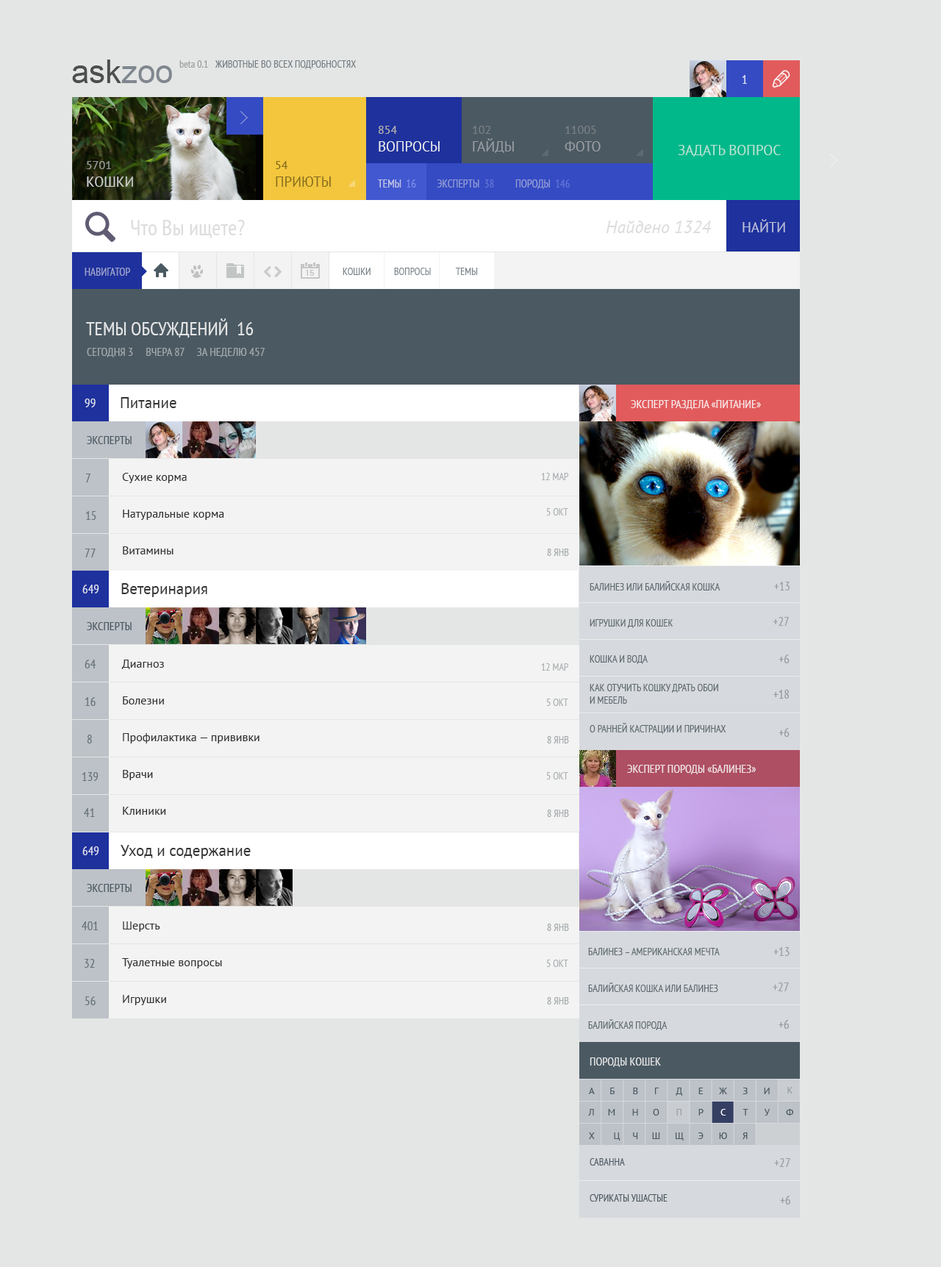
<style>
.page{position:relative;width:941px;height:1267px;background:#e4e6e5}
.page>*{position:absolute;margin:0}
.t1{font:32.4px "ArialMT"}
.t2{font:10.3px "PTSans-Narrow";color:#9a9c9b}
.t3{font:10.3px "PTSans-Narrow";color:#737d82;text-transform:uppercase}
.t4{font:12.5px "PTSans-Narrow";color:#e1e3f4}
.t5{font:14px/17.6px "PTSans-Regular";color:#ebecee;text-transform:uppercase}
.t6{font:11.8px/17.6px "PTSans-Regular";color:#aeaeae;text-transform:uppercase}
.t7{font:14px/17.6px "PTSans-Regular";color:#989ea3;text-transform:uppercase}
.t8{font:11.8px/17.6px "PTSans-Regular";color:#989ea3;text-transform:uppercase}
.t9{font:11.8px/17.6px "PTSans-Regular";text-transform:uppercase}
.t10{font:14px/17.6px "PTSans-Regular";text-transform:uppercase}
.t11{font:14px "PTSans-Regular";color:#b8e4d5;text-transform:uppercase}
.t12{font:14px/17.6px "PTSans-Regular";color:#cdcecf;text-transform:uppercase}
.t13{font:11.8px/17.6px "PTSans-Regular";color:#cdcecf;text-transform:uppercase}
.t14{font:14px/17.6px "PTSans-Regular";color:#866c1d;text-transform:uppercase}
.t15{font:11.8px/17.6px "PTSans-Regular";color:#866c1d;text-transform:uppercase}
.t16{font:11px "PTSans-Narrow";text-transform:uppercase}
.t17{font:11px "PTSans-Narrow";color:#c1c5e5;text-transform:uppercase}
.t18{font:22.1px "PTSans-Narrow";color:#dddddd}
.t19{font:17.6px "PTSans-Italic";color:#dddddd}
.t20{font:14px "PTSans-Regular";color:#bcbfdb;text-transform:uppercase}
.t21{font:11px "PTSans-Narrow";color:#9ea3cd;text-transform:uppercase}
.t22{font:10.3px "PTSans-Narrow";color:#7b848a;text-transform:uppercase}
.t23{font:19.1px "PTSans-Narrow";color:#e3e4e5;text-transform:uppercase}
.t24{font:11.8px "PTSans-Narrow";color:#a2a8ac;text-transform:uppercase}
.t25{font:12.5px "PTSans-Narrow";color:#dfe0ed}
.t26{font:15.4px "PTSans-Regular";color:#343434}
.t27{font:11.8px "PTSans-Narrow";color:#4b5962;text-transform:uppercase}
.t28{font:12.5px "PTSans-Narrow";color:#67727a}
.t29{font:11.8px/36.8px "PTSans-Regular";color:#313131}
.t30{font:10.3px "PTSans-Narrow";color:#abb0b3;text-transform:uppercase}
.t31{font:10.3px "PTSans-Narrow";color:#a4a9ac;text-transform:uppercase}
</style>
<div class="page">
<p class="t1" style="left:72px;top:60px;width:100px;height:23px">askzoo</p>
<p class="t2" style="left:179px;top:60px;width:29px;height:8px">beta 0.1</p>
<p class="t3" style="left:215px;top:60px;width:142px;height:9px">животные во всех подробностях</p>
<p class="t4" style="left:742px;top:75px;width:5px;height:9px">1</p>
<p class="t5" style="left:379px;top:126px;width:61px;height:25px"><span class="t6">854<br></span>вопросы</p>
<p class="t7" style="left:473px;top:126px;width:41px;height:27px"><span class="t8">102<br></span>гайды</p>
<p class="t9" style="left:565px;top:126px;width:36px;height:25px">11005<br><span class="t10">фото</span></p>
<p class="t11" style="left:678px;top:145px;width:103px;height:12px">задать вопрос</p>
<p class="t12" style="left:87px;top:161px;width:46px;height:26px"><span class="t13">5701<br></span>кошки</p>
<p class="t14" style="left:276px;top:161px;width:55px;height:26px"><span class="t15">54<br></span>приюты</p>
<p class="t16" style="left:378px;top:179px;width:192px;height:10px">темы  16         эксперты  38         породы  146</p>
<p class="t17" style="left:378px;top:179px;width:38px;height:9px">темы  16</p>
<p class="t18" style="left:131px;top:220px;width:114px;height:18px">Что Вы ищете?</p>
<p class="t19" style="left:606px;top:221px;width:106px;height:12px">Найдено 1324</p>
<p class="t20" style="left:743px;top:219px;width:42px;height:13px">Найти</p>
<p class="t21" style="left:85px;top:268px;width:45px;height:8px">навигатор</p>
<p class="t22" style="left:343px;top:268px;width:28px;height:7px">кошки</p>
<p class="t22" style="left:394px;top:268px;width:37px;height:7px">вопросы</p>
<p class="t22" style="left:456px;top:268px;width:22px;height:7px">темы</p>
<p class="t23" style="left:86px;top:318px;width:168px;height:20px">темы обсуждений  16</p>
<p class="t24" style="left:87px;top:348px;width:178px;height:9px">сегодня 3     вчера 87     за неделю 457</p>
<p class="t25" style="left:85px;top:399px;width:11px;height:8px">99</p>
<p class="t26" style="left:121px;top:397px;width:55px;height:11px">Питание</p>
<p class="t27" style="left:87px;top:436px;width:45px;height:8px">эксперты</p>
<p class="t28" style="left:85px;top:474px;width:5px;height:8px">7</p>
<p class="t29" style="left:122px;top:473px;width:102px;height:81px">Сухие корма<br>Натуральные корма<br>Витамины</p>
<p class="t30" style="left:541px;top:473px;width:28px;height:7px">12 мар</p>
<p class="t30" style="left:546px;top:508px;width:22px;height:7px">5 окт</p>
<p class="t28" style="left:85px;top:511px;width:11px;height:9px">15</p>
<p class="t28" style="left:85px;top:549px;width:11px;height:8px">77</p>
<p class="t31" style="left:547px;top:549px;width:22px;height:7px">8 янв</p>
<p class="t25" style="left:82px;top:585px;width:17px;height:8px">649</p>
<p class="t26" style="left:121px;top:583px;width:86px;height:14px">Ветеринария</p>
<p class="t27" style="left:87px;top:622px;width:45px;height:8px">эксперты</p>
<p class="t28" style="left:85px;top:660px;width:11px;height:8px">64</p>
<p class="t29" style="left:121px;top:660px;width:139px;height:155px">Диагноз<br>Болезни<br>Профилактика — прививки<br>Врачи<br>Клиники</p>
<p class="t30" style="left:541px;top:663px;width:28px;height:8px">12 мар</p>
<p class="t28" style="left:85px;top:697px;width:11px;height:9px">16</p>
<p class="t30" style="left:546px;top:699px;width:22px;height:7px">5 окт</p>
<p class="t28" style="left:87px;top:735px;width:5px;height:8px">8</p>
<p class="t31" style="left:547px;top:736px;width:22px;height:7px">8 янв</p>
<p class="t28" style="left:82px;top:772px;width:17px;height:9px">139</p>
<p class="t30" style="left:546px;top:772px;width:22px;height:7px">5 окт</p>
<p class="t28" style="left:84px;top:808px;width:11px;height:9px">41</p>
<p class="t31" style="left:547px;top:810px;width:22px;height:7px">8 янв</p>
<p class="t26" style="left:121px;top:845px;width:130px;height:14px">Уход и содержание</p>
<p class="t25" style="left:82px;top:846px;width:17px;height:9px">649</p>
<p class="t27" style="left:87px;top:884px;width:45px;height:8px">эксперты</p>
<p class="t28" style="left:82px;top:921px;width:16px;height:9px">401</p>
<p class="t29" style="left:122px;top:921px;width:100px;height:84px">Шерсть<br>Туалетные вопросы<br>Игрушки</p>
<p class="t31" style="left:547px;top:924px;width:22px;height:7px">8 янв</p>
<p class="t28" style="left:85px;top:959px;width:10px;height:9px">32</p>
<p class="t30" style="left:546px;top:960px;width:22px;height:7px">5 окт</p>
<p class="t28" style="left:85px;top:996px;width:11px;height:9px">56</p>
<p class="t31" style="left:547px;top:997px;width:22px;height:7px">8 янв</p>
</div>
